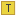
<style>
.page{position:relative;width:16px;height:16px;background:#ead440}
.page>*{position:absolute;margin:0}
.t1{font:11.7px "TwCenMT-Regular";letter-spacing:0.01em;color:#3e4042;scale:1.09 1}
</style>
<div class="page">
<p class="t1" style="left:6px;top:4px;width:5px;height:8px">T</p>
</div>
